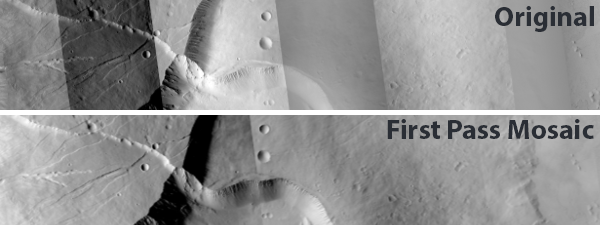
<style>
.page{position:relative;width:600px;height:225px}
.page>*{position:absolute;margin:0}
.t1{font:28px "MyriadPro-Bold";color:#2a2e35}
</style>
<div class="page">
<p class="t1" style="left:495px;top:6px;width:99px;height:26px">Original</p>
<p class="t1" style="left:387px;top:119px;width:207px;height:20px">First Pass Mosaic</p>
</div>
